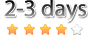
<style>
.page{position:relative;width:91px;height:36px;background:#ffffff}
.page>*{position:absolute;margin:0}
.t1{font:24px "MyriadPro-Regular"}
</style>
<div class="page">
<p class="t1" style="left:4px;top:0px;width:82px;height:22px">2-3 days</p>
</div>
